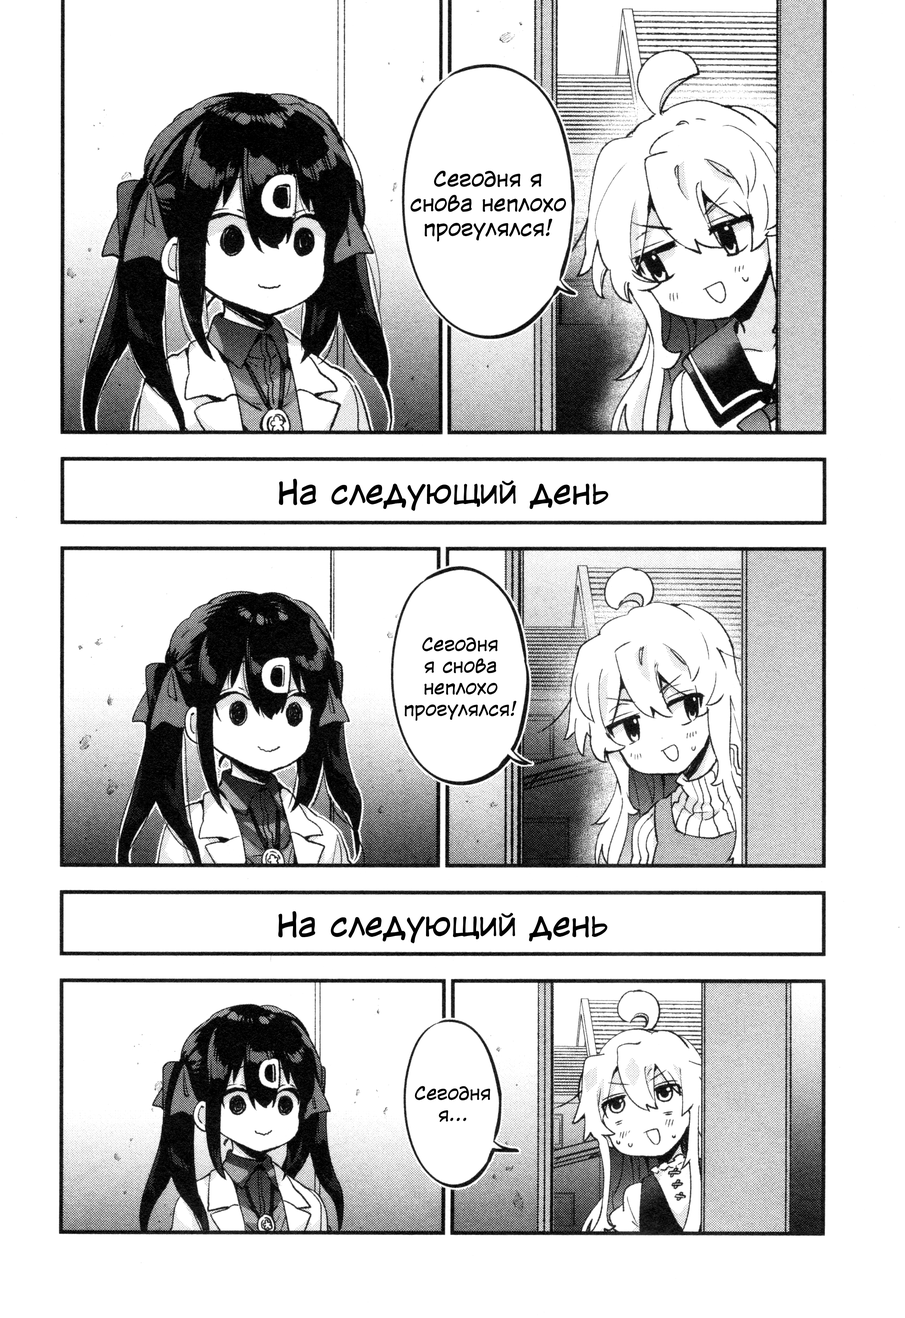
<style>
.page{position:relative;width:905px;height:1318px;background:#ffffff}
.page>*{position:absolute;margin:0}
.t1{font:20.6px "v_CCWildWordsLower";letter-spacing:0.006em;color:#000000}
.t2{font:30.9px "CCWildWordsLower-Regular";letter-spacing:0.006em;color:#000000}
.t3{font:18px "v_CCWildWordsLower";letter-spacing:0.006em;color:#000000}
</style>
<div class="page">
<p class="t1" style="left:410px;top:171px;width:156px;height:71px;text-align:center">Сегодня я снова неплохо прогулялся!</p>
<p class="t2" style="left:279px;top:479px;width:329px;height:32px">На следующий день</p>
<p class="t3" style="left:404px;top:637px;width:112px;height:84px;text-align:center">Сегодня<br>я снова неплохо прогулялся!</p>
<p class="t2" style="left:278px;top:911px;width:329px;height:32px">На следующий день</p>
<p class="t3" style="left:415px;top:1086px;width:75px;height:36px;text-align:center">Сегодня я...</p>
</div>
